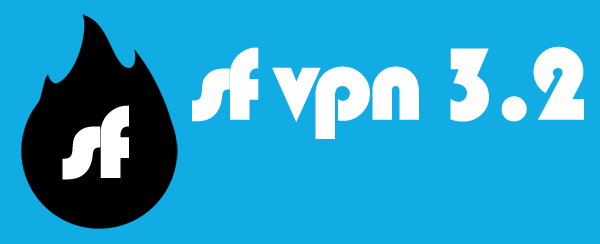
<style>
.page{position:relative;width:600px;height:244px;background:#12ace5}
.page>*{position:absolute;margin:0}
.t1{font:106.5px "Bauhaus93";letter-spacing:-0.055em;color:#ffffff}
.t2{font:106.8px "Bauhaus93";letter-spacing:-0.055em;color:#ffffff}
</style>
<div class="page">
<p class="t1" style="left:192px;top:46px;width:392px;height:93px">sf vpn 3.2</p>
<p class="t2" style="left:62px;top:105px;width:67px;height:75px">sf</p>
</div>
